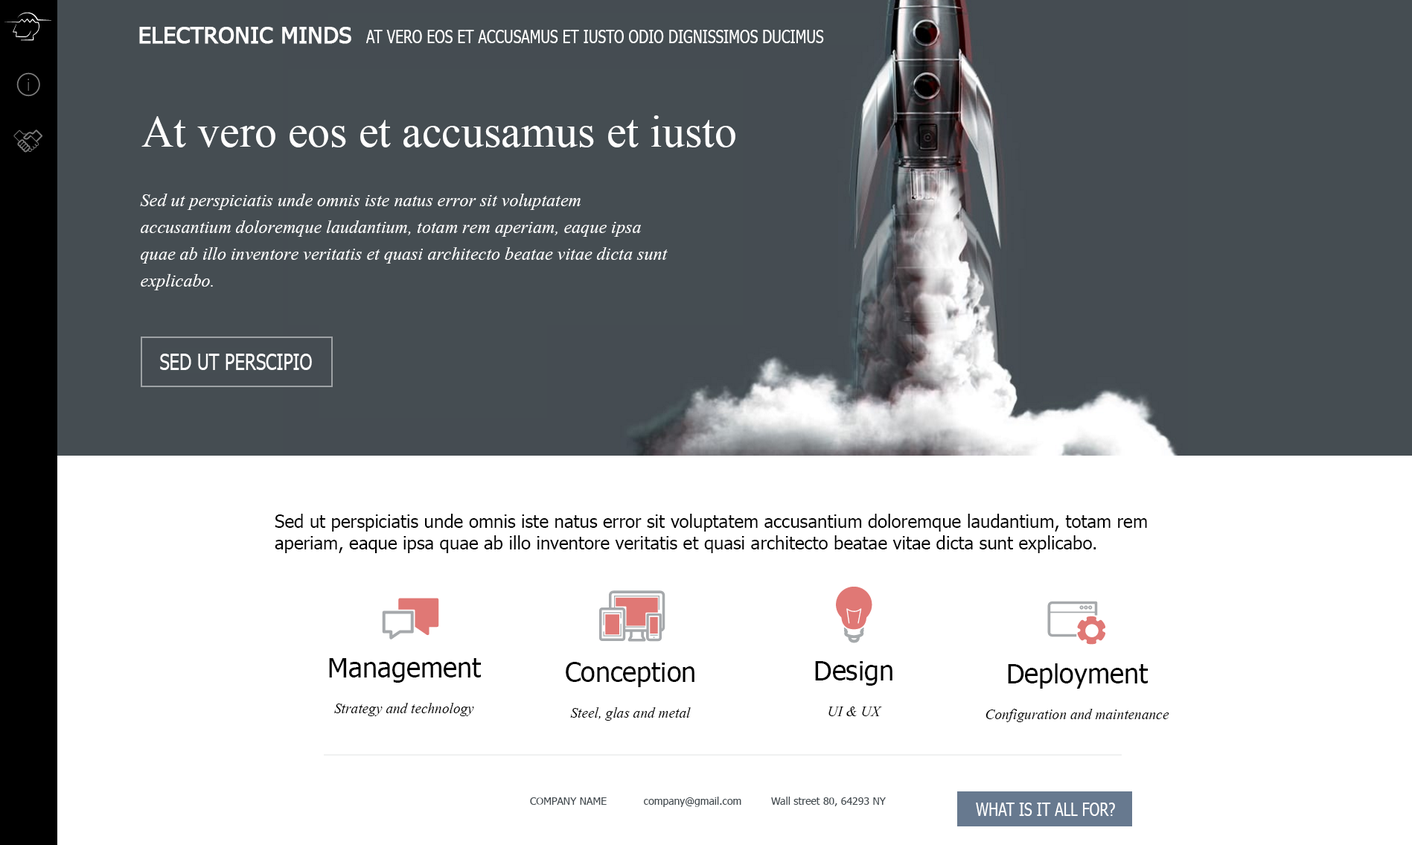
<style>
.page{position:relative;width:1412px;height:845px;background:#ffffff}
.page>*{position:absolute;margin:0}
.t1{font:17.9px "Tahoma";color:#ffffff;scale:0.8 1}
.t2{font:22.3px "Tahoma";color:#ffffff;font-weight:bold}
.t3{font:44.7px "TimesNewRomanPSMT";color:#ffffff}
.t4{font:22.3px "Vijaya";color:#ffffff}
.t5{font:22.3px "Tahoma";color:#ffffff;scale:0.8 1}
.t6{font:17.9px "Tahoma";color:#000000}
.t7{font:17.9px/35.7px "Vijaya";color:#000000}
.t8{font:26.8px "Tahoma";color:#000000}
.t9{font:10.4px "Tahoma";color:#454d52}
</style>
<div class="page">
<p class="t1" style="left:139px;top:27px;width:685px;height:17px"><span class="t2">ELECTRONIC MINDS  </span>AT VERO EOS ET ACCUSAMUS ET IUSTO ODIO DIGNISSIMOS DUCIMUS</p>
<p class="t3" style="left:141px;top:115px;width:594px;height:32px">At vero eos et accusamus et iusto</p>
<p class="t4" style="left:140px;top:193px;width:528px;height:97px;text-align:right">Sed ut perspiciatis unde omnis iste natus error sit voluptatem accusantium doloremque laudantium, totam rem aperiam, eaque ipsa quae ab illo inventore veritatis et quasi architecto beatae vitae dicta sunt explicabo.</p>
<p class="t5" style="left:160px;top:353px;width:152px;height:17px">SED UT PERSCIPIO</p>
<p class="t6" style="left:275px;top:513px;width:872px;height:40px;text-align:right">Sed ut perspiciatis unde omnis iste natus error sit voluptatem accusantium doloremque laudantium, totam rem aperiam, eaque ipsa quae ab illo inventore veritatis et quasi architecto beatae vitae dicta sunt explicabo.</p>
<p class="t7" style="left:329px;top:658px;width:152px;height:58px;text-align:center"><span class="t8">Management<br></span>Strategy and technology</p>
<p class="t7" style="left:566px;top:662px;width:128px;height:58px;text-align:center"><span class="t8">Conception<br></span>Steel, glas and metal</p>
<p class="t7" style="left:815px;top:661px;width:77px;height:55px;text-align:center"><span class="t8">Design<br></span>UI &amp; UX</p>
<p class="t7" style="left:985px;top:663px;width:184px;height:59px;text-align:center"><span class="t8">Deployment<br></span>Configuration and maintenance</p>
<p class="t9" style="left:530px;top:796px;width:356px;height:11px">COMPANY NAME     company@gmail.com   Wall street 80, 64293 NY</p>
<p class="t1" style="left:976px;top:802px;width:139px;height:14px">WHAT IS IT ALL FOR?</p>
</div>
